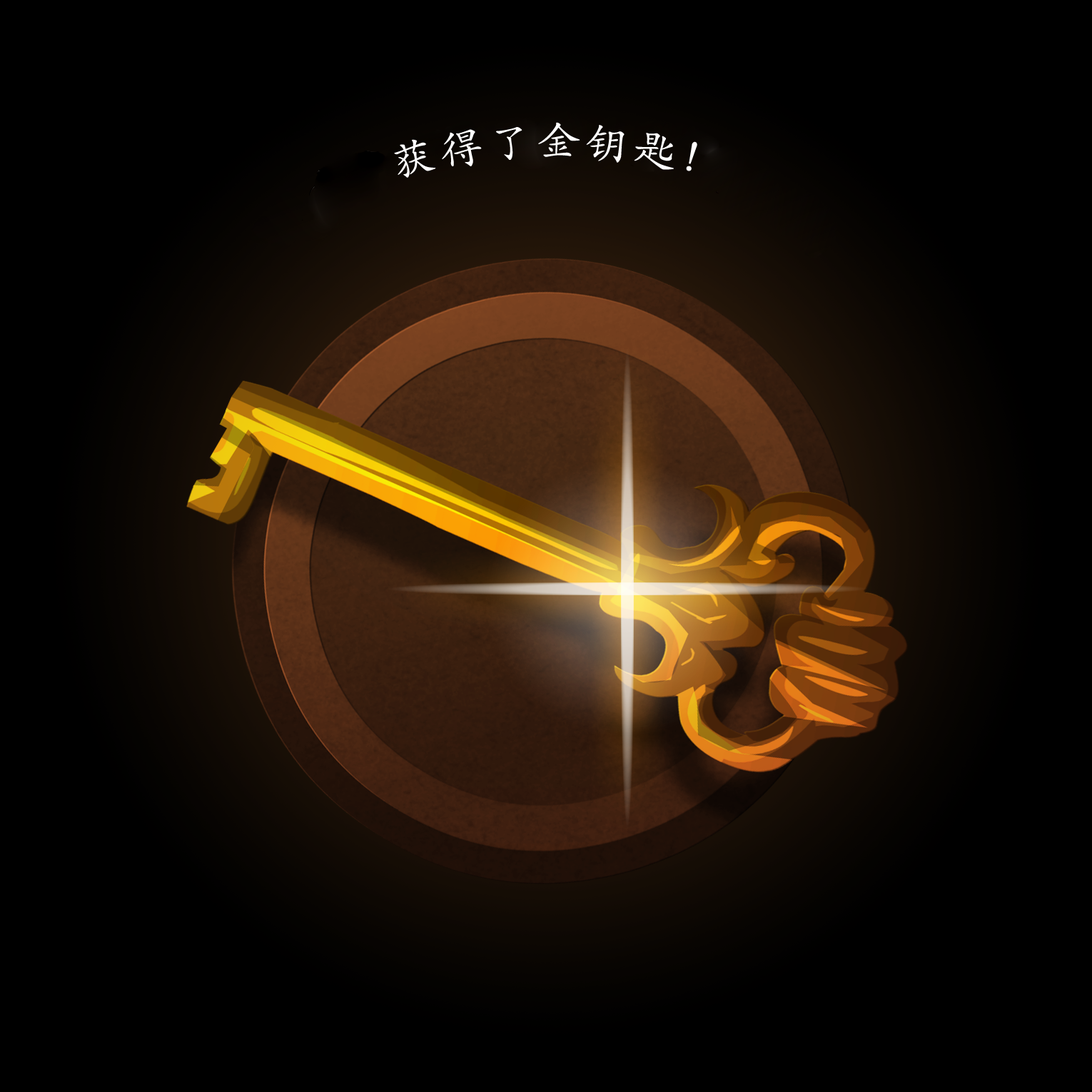
<style>
.page{position:relative;width:1092px;height:1092px;background:#000000}
.page>*{position:absolute;margin:0}
.t1{font:41.9px "STKaiti";letter-spacing:0.1em;color:#ffffff}
</style>
<div class="page">
<p class="t1" style="left:394px;top:122px;width:303px;height:56px">获得了金钥匙！</p>
</div>
